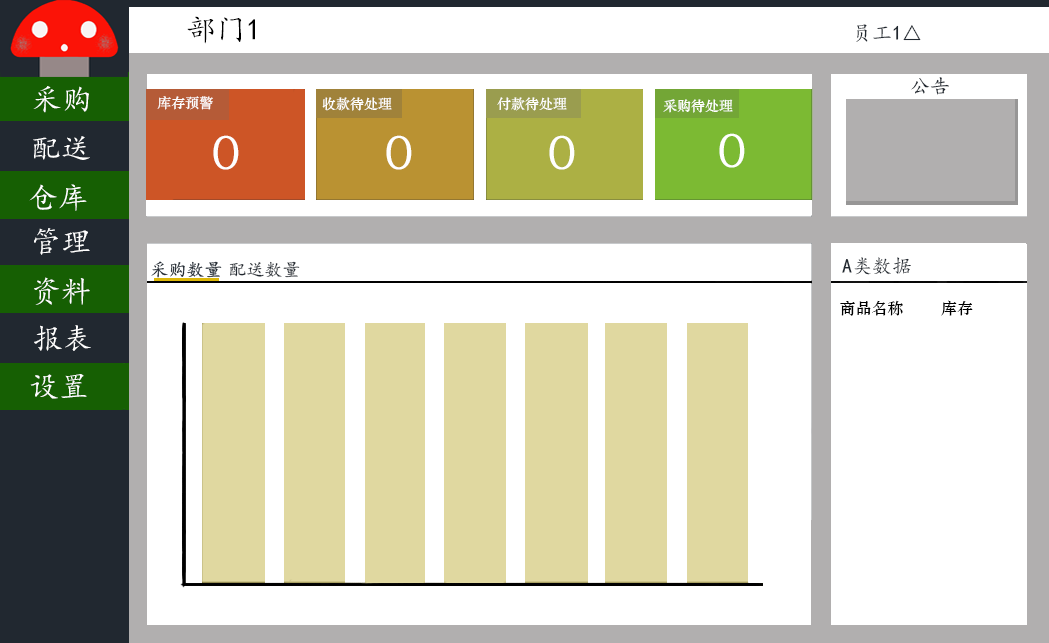
<style>
.page{position:relative;width:1049px;height:643px;background:#ffffff}
.page>*{position:absolute;margin:0}
.t1{font:30px "KaiTi";color:#000000}
.t2{font:20px "KaiTi";color:#212830}
.t3{font:30px "KaiTi";color:#ffffff}
.t4{font:14px "STZhongsong";color:#fefefe}
.t5{font:48px "STZhongsong";color:#fefefe}
.t6{font:48px "STZhongsong";color:#ffffff}
.t7{font:18px "KaiTi";color:#212830}
.t8{font:16px "STZhongsong";color:#000000}
</style>
<div class="page">
<p class="t1" style="left:187px;top:16px;width:68px;height:28px">部门1</p>
<p class="t2" style="left:856px;top:24px;width:65px;height:18px">员工1△</p>
<p class="t2" style="left:911px;top:77px;width:38px;height:18px">公告</p>
<p class="t3" style="left:33px;top:86px;width:56px;height:27px">采购</p>
<p class="t4" style="left:157px;top:96px;width:56px;height:14px">库存预警</p>
<p class="t4" style="left:322px;top:97px;width:70px;height:14px">收款待处理</p>
<p class="t4" style="left:497px;top:97px;width:70px;height:14px">付款待处理</p>
<p class="t4" style="left:663px;top:99px;width:70px;height:14px">采购待处理</p>
<p class="t3" style="left:33px;top:136px;width:57px;height:24px">配送</p>
<p class="t5" style="left:213px;top:135px;width:26px;height:35px">0</p>
<p class="t6" style="left:386px;top:135px;width:26px;height:35px">0</p>
<p class="t6" style="left:549px;top:135px;width:26px;height:35px">0</p>
<p class="t6" style="left:719px;top:133px;width:26px;height:35px">0</p>
<p class="t3" style="left:29px;top:184px;width:58px;height:27px">仓库</p>
<p class="t3" style="left:34px;top:228px;width:56px;height:27px">管理</p>
<p class="t2" style="left:842px;top:257px;width:69px;height:18px">A类数据</p>
<p class="t7" style="left:229px;top:261px;width:71px;height:17px">配送数量</p>
<p class="t3" style="left:34px;top:277px;width:56px;height:28px">资料</p>
<p class="t8" style="left:840px;top:300px;width:63px;height:16px">商品名称</p>
<p class="t8" style="left:941px;top:300px;width:32px;height:16px">库存</p>
<p class="t3" style="left:34px;top:325px;width:57px;height:26px">报表</p>
<p class="t3" style="left:30px;top:374px;width:57px;height:25px">设置</p>
</div>
